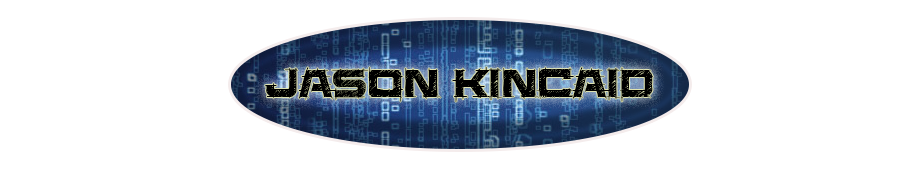
<style>
.page{position:relative;width:920px;height:170px;background:#ffffff}
.page>*{position:absolute;margin:0}
.t1{font:45.8px "SaucerBB";color:#000000}
</style>
<div class="page">
<p class="t1" style="left:265px;top:67px;width:388px;height:35px">Jason Kincaid</p>
</div>
